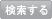
<style>
.page{position:relative;width:52px;height:19px;background:#a4a5a8}
.page>*{position:absolute;margin:0}
.t1{font:11px "MS-Gothic";color:#ffffff;text-transform:uppercase}
</style>
<div class="page">
<p class="t1" style="left:5px;top:5px;width:43px;height:10px">検索する</p>
</div>
